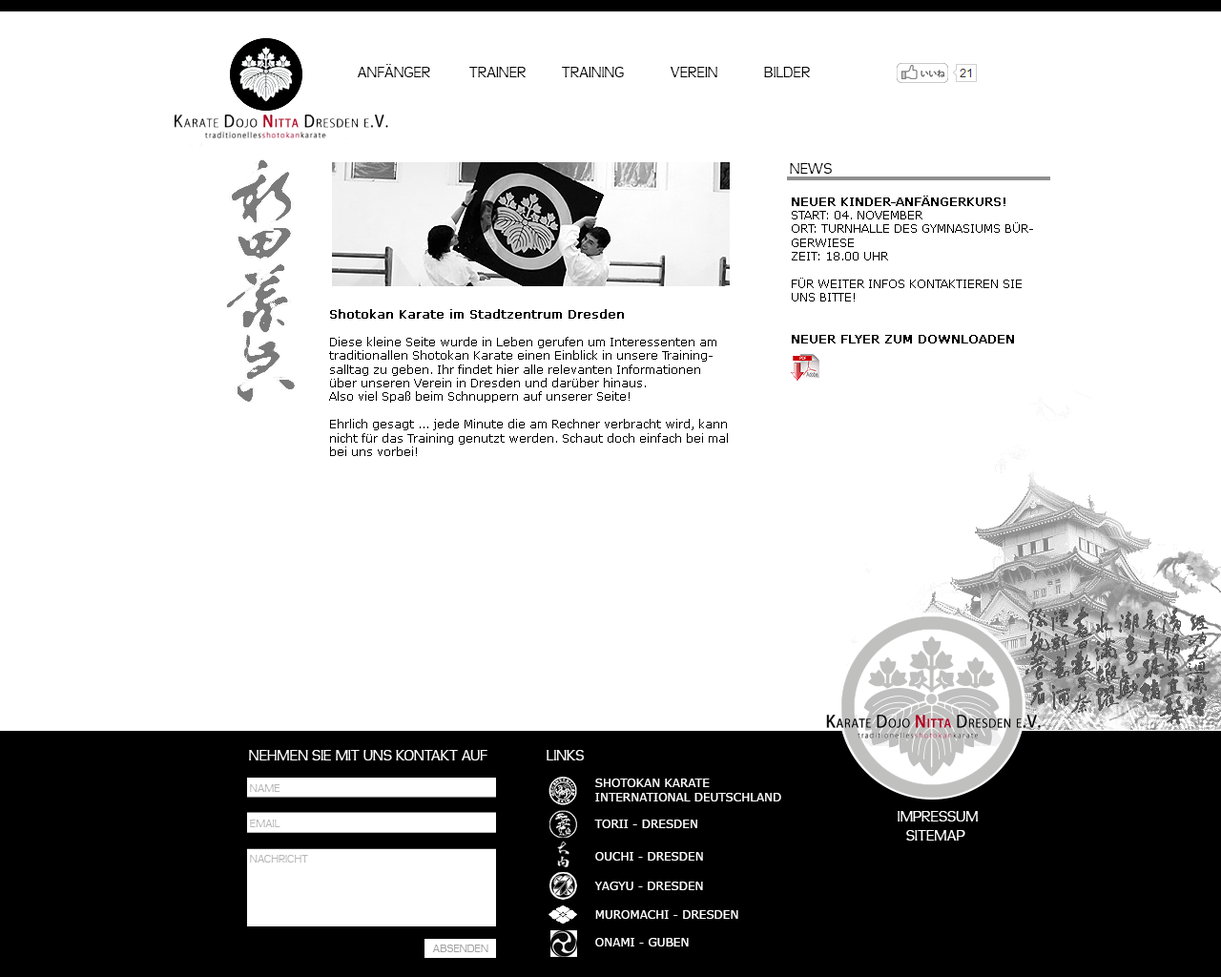
<style>
.page{position:relative;width:1221px;height:977px;background:#ffffff}
.page>*{position:absolute;margin:0}
.t1{font:15.3px "TeenLight-Regular";color:#000000;text-transform:uppercase}
.t2{font:11.4px "Verdana";color:#000000;text-transform:uppercase}
.t3{font:11.4px "Verdana";color:#000000;text-transform:uppercase;font-weight:bold}
.t4{font:11.4px "Verdana";color:#000000}
.t5{font:11.4px "Verdana";color:#000000;font-weight:bold}
.t6{font:15.3px "TeenLight-Regular";color:#ffffff;text-transform:uppercase}
.t7{font:11.4px "TeenLight-Regular";color:#b8b8b8;text-transform:uppercase}
.t8{font:11.4px "Verdana";color:#ffffff;text-transform:uppercase}
.t9{font:11.4px "TeenLight-Regular";color:#a2a2a2;text-transform:uppercase}
</style>
<div class="page">
<p class="t1" style="left:357px;top:64px;width:73px;height:13px">ANFÄNGER</p>
<p class="t1" style="left:469px;top:67px;width:58px;height:10px">TRAINER</p>
<p class="t1" style="left:562px;top:67px;width:62px;height:10px">TRAINING</p>
<p class="t1" style="left:670px;top:67px;width:47px;height:10px">VEREIN</p>
<p class="t1" style="left:764px;top:67px;width:47px;height:10px">BILDER</p>
<p class="t1" style="left:790px;top:163px;width:42px;height:11px">NEWS</p>
<p class="t2" style="left:792px;top:196px;width:241px;height:147px"><span class="t3">Neuer Kinder-Anfängerkurs!<br></span>Start: 04. November<br>Ort: Turnhalle des Gymnasiums Bürgerwiese<br>Zeit: 18.00 Uhr <br><br>Für weiter Infos kontaktieren Sie uns bitte!<br><br><span class="t3"><br>NEUER Flyer zum DownloadEN</span></p>
<p class="t4" style="left:329px;top:309px;width:399px;height:147px"><span class="t5">Shotokan Karate im Stadtzentrum Dresden<br></span><br>Diese kleine Seite wurde in Leben gerufen um Interessenten am traditionallen Shotokan Karate einen Einblick in unsere Trainingsalltag zu geben. Ihr findet hier alle relevanten Informationen über unseren Verein in Dresden und darüber hinaus.<br>Also viel Spaß beim Schnuppern auf unserer Seite!<br><br>Ehrlich gesagt ... jede Minute die am Rechner verbracht wird, kann nicht für das Training genutzt werden. Schaut doch einfach bei mal bei uns vorbei!</p>
<p class="t6" style="left:249px;top:750px;width:238px;height:10px">NEHMEN SIE MIT UNS KONTAKT AUF</p>
<p class="t6" style="left:547px;top:750px;width:37px;height:10px">LINKS</p>
<p class="t7" style="left:250px;top:784px;width:30px;height:8px">NAME</p>
<p class="t8" style="left:595px;top:778px;width:186px;height:23px">SHOTOKAN KARATE<br>INTERNATIONAL DEUTSCHLAND</p>
<p class="t7" style="left:250px;top:819px;width:30px;height:8px">EMAIL</p>
<p class="t8" style="left:594px;top:819px;width:103px;height:9px">TORII - DRESDEN</p>
<p class="t6" style="left:898px;top:811px;width:80px;height:10px">IMPRESSUM</p>
<p class="t6" style="left:906px;top:830px;width:59px;height:10px">SITEMAP</p>
<p class="t7" style="left:250px;top:855px;width:58px;height:7px">NACHRICHT</p>
<p class="t8" style="left:595px;top:852px;width:108px;height:8px">OUCHI - DRESDEN</p>
<p class="t8" style="left:594px;top:881px;width:109px;height:9px">YAGYU - DRESDEN</p>
<p class="t8" style="left:595px;top:910px;width:143px;height:9px">MUROMACHI - DRESDEN</p>
<p class="t8" style="left:595px;top:938px;width:94px;height:8px">ONAMI - GUBEN</p>
<p class="t9" style="left:432px;top:944px;width:56px;height:8px">ABSENDEN</p>
</div>
